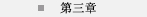
<style>
.page{position:relative;width:147px;height:17px;background:#f1f1f1}
.page>*{position:absolute;margin:0}
.t1{font:12px "SimSun";color:#000000;font-weight:bold}
</style>
<div class="page">
<p class="t1" style="left:40px;top:0px;width:77px;height:17px">第三章</p>
</div>
